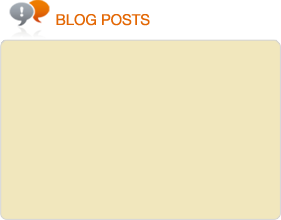
<style>
.page{position:relative;width:281px;height:220px;background:#f1e7bd}
.page>*{position:absolute;margin:0}
.t1{font:15px "HelveticaNeueLTStd-Roman";color:#e36704}
</style>
<div class="page">
<p class="t1" style="left:56px;top:14px;width:94px;height:12px">BLOG POSTS</p>
</div>
